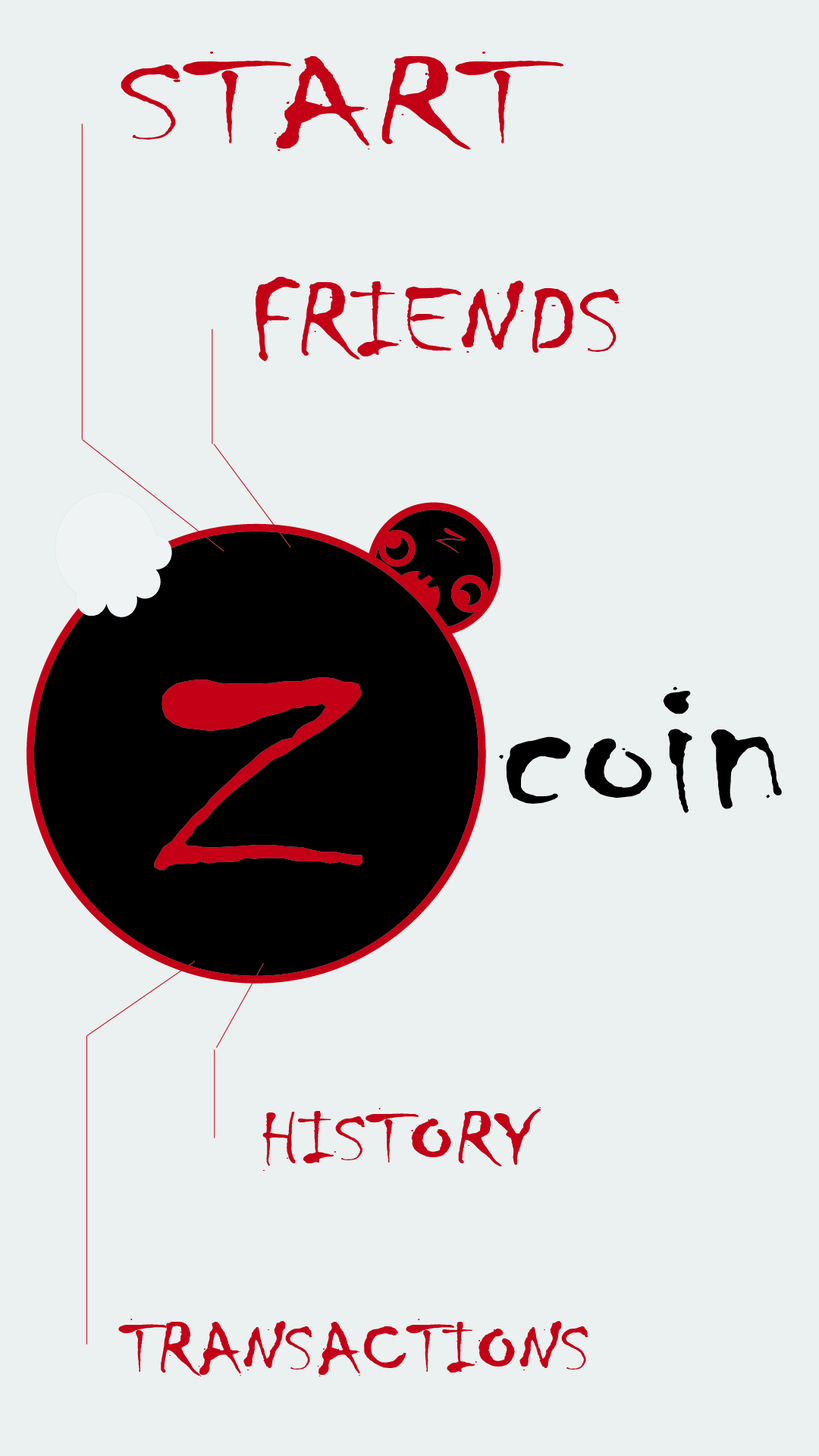
<style>
.page{position:relative;width:819px;height:1456px;background:#ebf0f0}
.page>*{position:absolute;margin:0}
.t1{font:126.5px "Chiller-Regular";color:#c30016;scale:1.63 1}
.t2{font:106.3px "Chiller-Regular";color:#c30016;scale:1.27 1}
.t3{font:74.3px "Chiller-Regular";color:#c30016;scale:1.34 1}
.t4{font:72.4px "Chiller-Regular";color:#c30016;scale:1.25 1}
</style>
<div class="page">
<p class="t1" style="left:121px;top:52px;width:442px;height:99px">START</p>
<p class="t2" style="left:256px;top:277px;width:364px;height:84px">FRIENDS</p>
<p class="t3" style="left:262px;top:1107px;width:279px;height:64px">HISTORY</p>
<p class="t4" style="left:118px;top:1319px;width:470px;height:57px">TRANSACTIONS</p>
</div>
